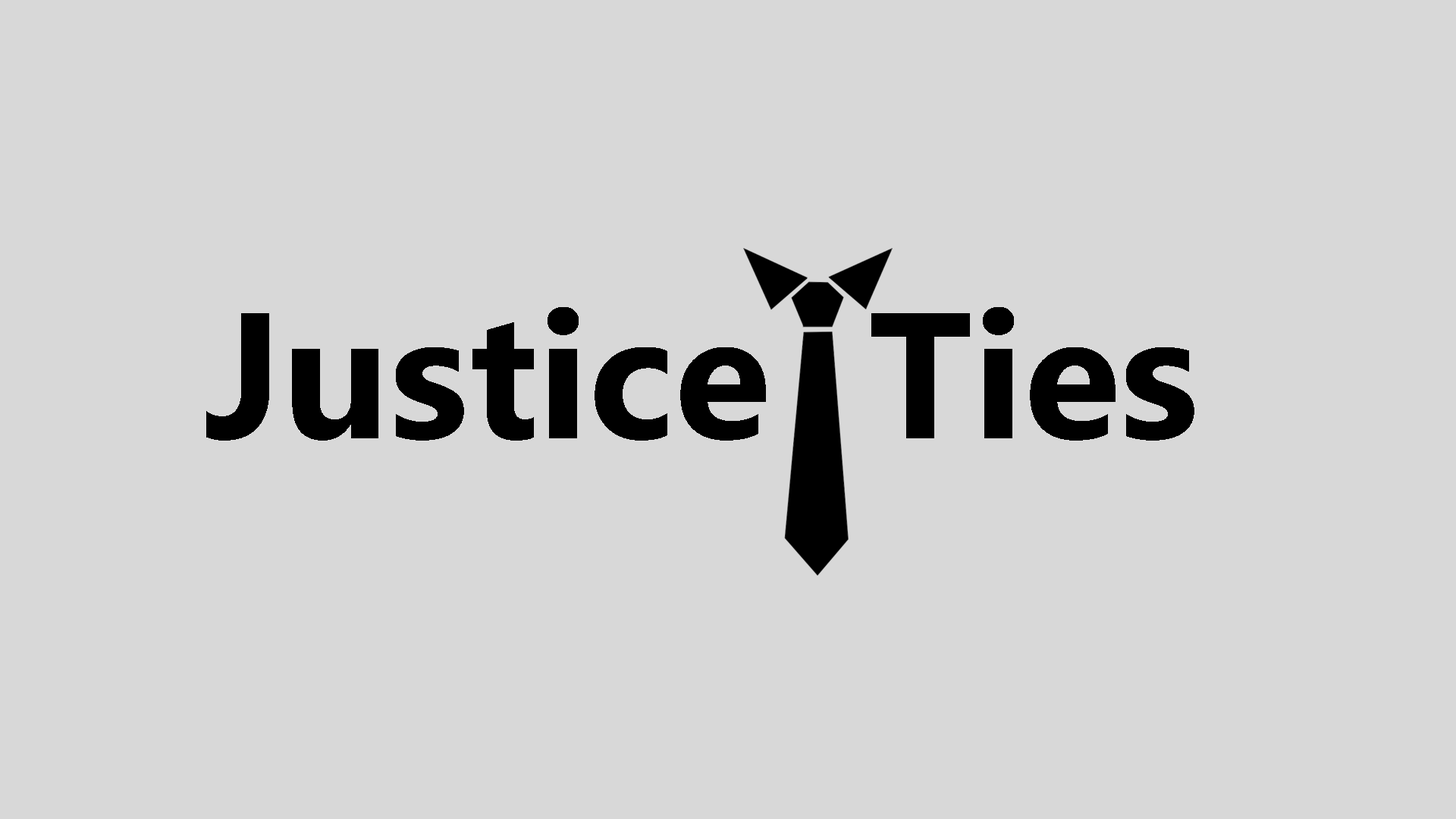
<style>
.page{position:relative;width:1456px;height:819px;background:#d8d8d8}
.page>*{position:absolute;margin:0}
.t1{font:178px "MicrosoftPhagsPa-Bold";color:#000000}
</style>
<div class="page">
<p class="t1" style="left:206px;top:307px;width:988px;height:134px">Justice  Ties</p>
</div>
